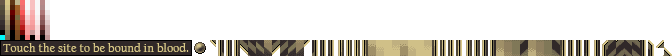
<style>
.page{position:relative;width:672px;height:56px;background:#ffffff}
.page>*{position:absolute;margin:0}
.t1{font:12px "CalifornianFB-Reg";letter-spacing:0.025em;color:#d8c888}
</style>
<div class="page">
<p class="t1" style="left:3px;top:43px;width:186px;height:9px">Touch the site to be bound in blood.</p>
</div>
